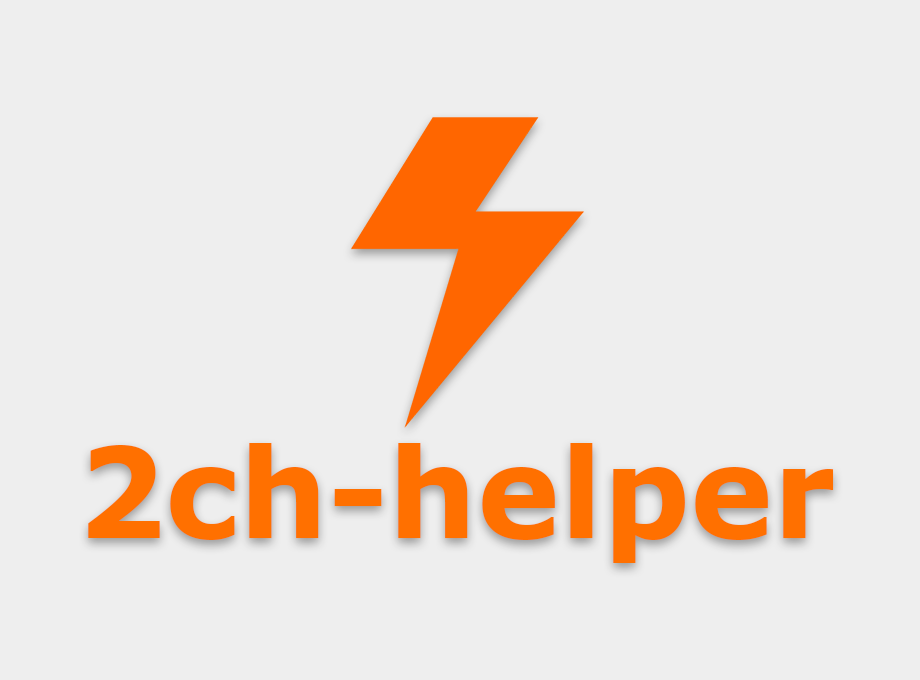
<style>
.page{position:relative;width:920px;height:680px;background:#eeeeee}
.page>*{position:absolute;margin:0}
.t1{font:125px "Verdana-Bold";color:#ff7000}
</style>
<div class="page">
<p class="t1" style="left:88px;top:443px;width:746px;height:120px">2ch-helper</p>
</div>
